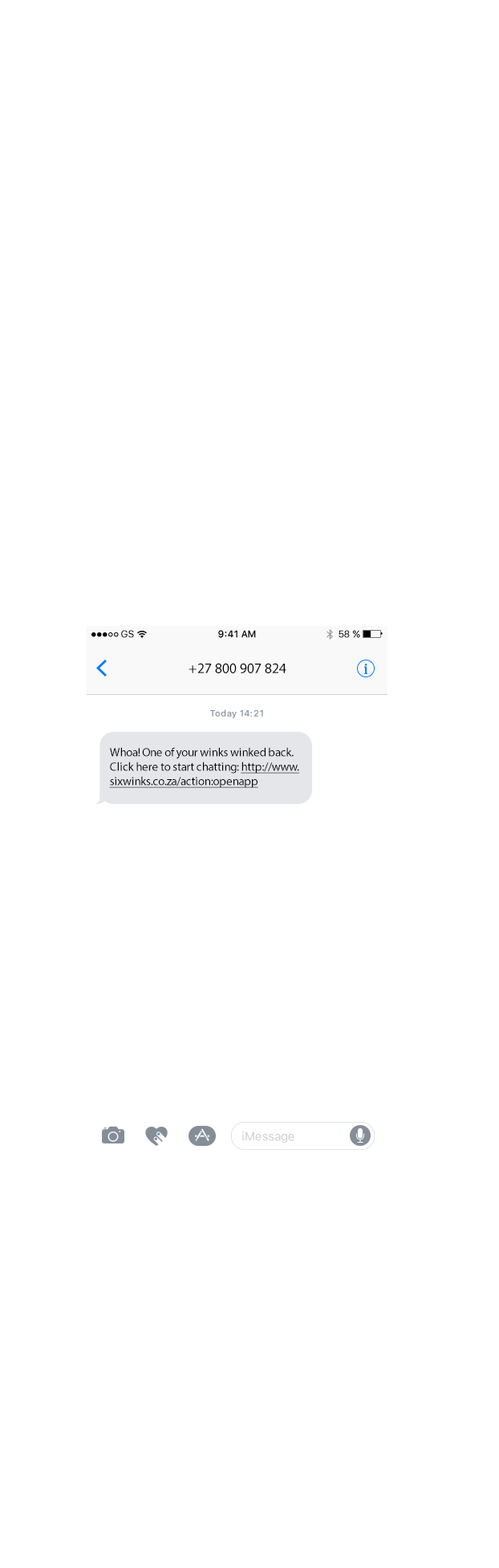
<style>
.page{position:relative;width:499px;height:1568px;background:#ffffff}
.page>*{position:absolute;margin:0}
.t1{font:9.6px "SFUIText-Regular"}
.t2{font:9.6px "SFUIText-Medium";color:#000000}
.t3{font:9.6px "SFUIText-Regular";color:#000000}
.t4{font:14.4px "MyriadPro-Regular";color:#000000}
.t5{font:8.8px "SFUIText-Medium";letter-spacing:0.035em;color:#858e99}
.t6{font:12px/14.4px "MyriadPro-Regular";letter-spacing:-0.016em;color:#000000}
.t7{font:12px/14.4px "MyriadPro-Regular";letter-spacing:-0.016em;color:#000000;text-decoration:underline}
.t8{font:12px "SFUIText-Regular";letter-spacing:-0.016em;color:#cdced2}
</style>
<div class="page">
<p class="t1" style="left:121px;top:630px;width:13px;height:8px">GS</p>
<p class="t2" style="left:218px;top:630px;width:38px;height:8px">9:41 AM</p>
<p class="t3" style="left:339px;top:630px;width:21px;height:8px">58 %</p>
<p class="t4" style="left:189px;top:663px;width:97px;height:10px">+27 800 907 824</p>
<p class="t5" style="left:210px;top:709px;width:53px;height:9px">Today 14:21</p>
<p class="t6" style="left:109px;top:747px;width:190px;height:41px">Whoa! One of your winks winked back. <br>Click here to start chatting: <span class="t7">http://www.<br>sixwinks.co.za/action:openapp</span></p>
<p class="t8" style="left:242px;top:1131px;width:53px;height:12px">iMessage</p>
</div>
